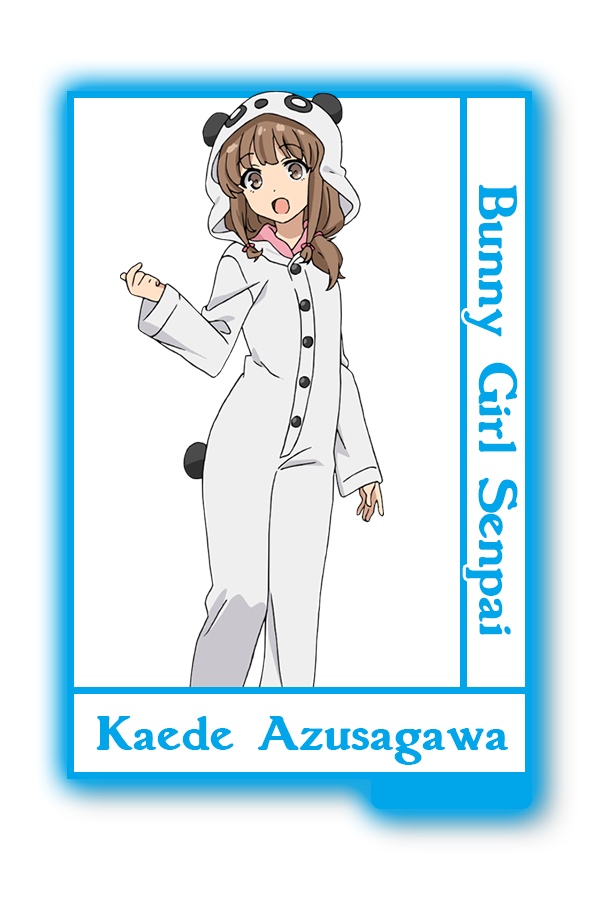
<style>
.page{position:relative;width:600px;height:900px;background:#ffffff}
.page>*{position:absolute;margin:0}
.t1{font:48.8px "Grantham-Bold";color:#0ba3e1}
.t2{font:45.6px "Grantham-Bold";color:#0ba3e1}
</style>
<div class="page">
<p class="t1" style="left:464px;top:184px;width:54px;height:451px;rotate:90deg">Bunny Girl Senpai</p>
<p class="t2" style="left:96px;top:716px;width:413px;height:49px">Kaede Azusagawa</p>
</div>
